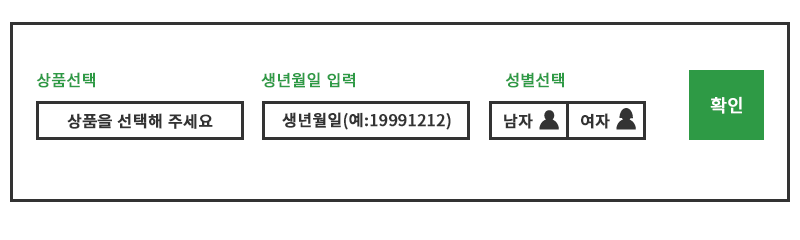
<style>
.page{position:relative;width:800px;height:240px;background:#ffffff}
.page>*{position:absolute;margin:0}
.t1{font:16px "NotoSansKR-Regular";color:#2e9a45;font-weight:bold}
.t2{font:18px "NotoSansKR-Regular";color:#ffffff;font-weight:bold}
.t3{font:16px "NotoSansKR-Medium";color:#333333;font-weight:bold}
</style>
<div class="page">
<p class="t1" style="left:36px;top:72px;width:59px;height:16px">상품선택</p>
<p class="t1" style="left:261px;top:72px;width:94px;height:16px">생년월일 입력</p>
<p class="t1" style="left:505px;top:72px;width:59px;height:16px">성별선택</p>
<p class="t2" style="left:710px;top:96px;width:32px;height:18px">확인</p>
<p class="t3" style="left:67px;top:113px;width:146px;height:16px">상품을 선택해 주세요</p>
<p class="t3" style="left:282px;top:112px;width:169px;height:18px">생년월일(예:19991212)</p>
<p class="t3" style="left:504px;top:113px;width:29px;height:16px">남자</p>
<p class="t3" style="left:581px;top:113px;width:29px;height:16px">여자</p>
</div>
